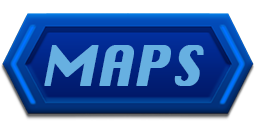
<style>
.page{position:relative;width:257px;height:128px;background:#ffffff}
.page>*{position:absolute;margin:0}
.t1{font:53.5px "Silom";color:#67b0e1;font-weight:bold;font-style:italic}
</style>
<div class="page">
<p class="t1" style="left:44px;top:45px;width:160px;height:41px">MAPS</p>
</div>
